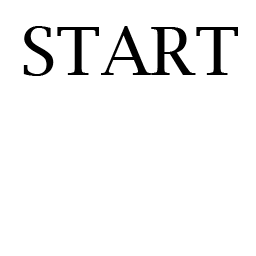
<style>
.page{position:relative;width:256px;height:256px;background:#ffffff}
.page>*{position:absolute;margin:0}
.t1{font:66.7px "LucidaBright";color:#000000}
</style>
<div class="page">
<p class="t1" style="left:23px;top:26px;width:215px;height:50px">START</p>
</div>
